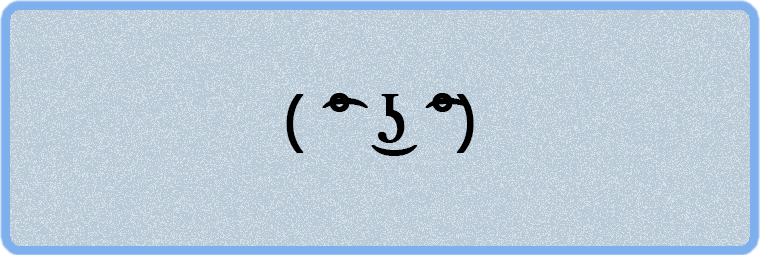
<style>
.page{position:relative;width:760px;height:255px;background:#bbcad7}
.page>*{position:absolute;margin:0}
.t1{font:67.2px "TimesNewRomanPSMT";color:#000000;font-weight:bold}
.t2{font:67.2px "Gadugi";color:#000000;font-weight:bold}
</style>
<div class="page">
<p class="t1" style="left:286px;top:93px;width:188px;height:63px"><span class="t2"><br>( </span>͡<span class="t2">° </span>͜ʖ ͡<span class="t2">°)</span></p>
</div>
